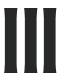
<style>
.page{position:relative;width:60px;height:80px;background:#ffffff}
.page>*{position:absolute;margin:0}
.t1{font:100px "ARESSENCE";color:#272828}
</style>
<div class="page">
<p class="t1" style="left:4px;top:8px;width:53px;height:65px">III</p>
</div>
